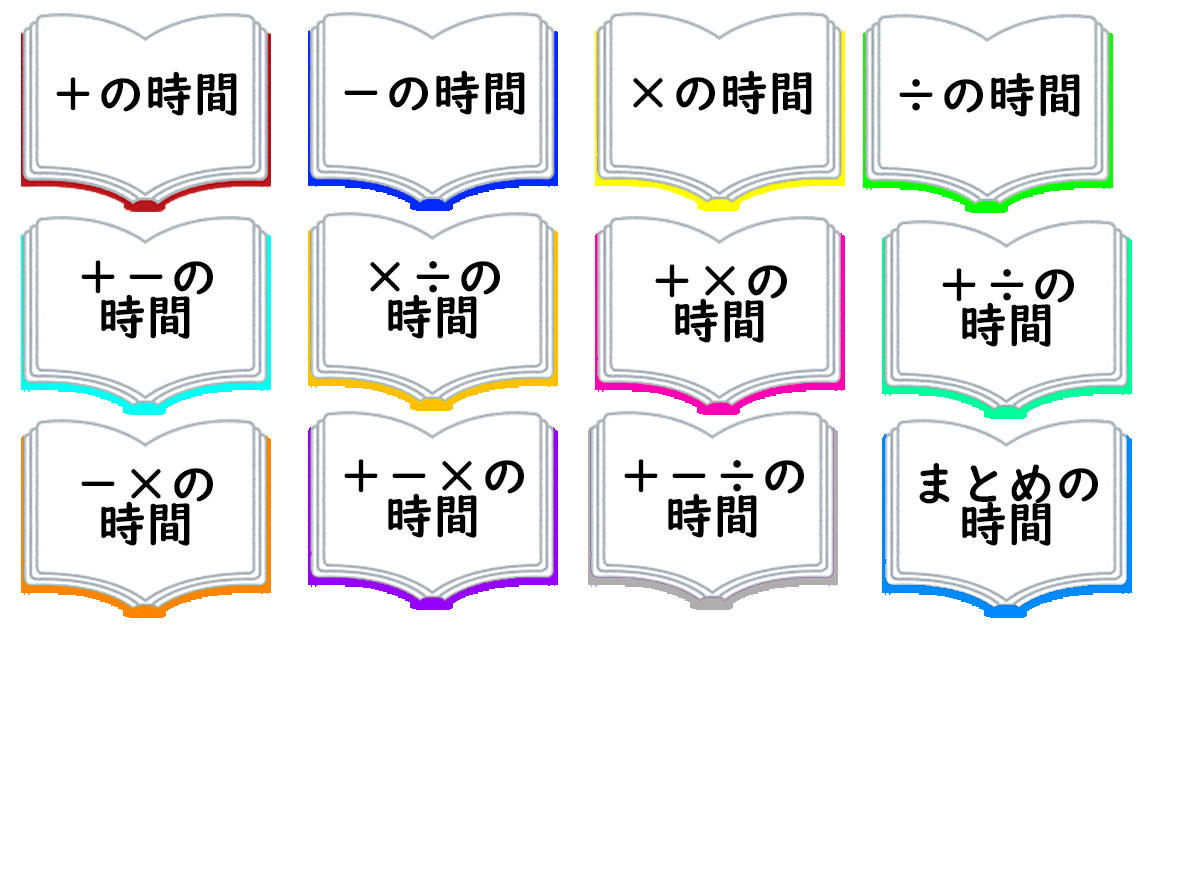
<style>
.page{position:relative;width:1200px;height:880px;background:#ffffff}
.page>*{position:absolute;margin:0}
.t1{font:48px "UDDigiKyokashoN-B";color:#000000}
.t2{font:48px/40px "UDDigiKyokashoN-B";color:#000000}
</style>
<div class="page">
<p class="t1" style="left:56px;top:71px;width:181px;height:45px">＋の時間</p>
<p class="t1" style="left:344px;top:70px;width:181px;height:45px">－の時間</p>
<p class="t1" style="left:633px;top:70px;width:179px;height:45px">×の時間</p>
<p class="t1" style="left:899px;top:72px;width:181px;height:45px">÷の時間</p>
<p class="t2" style="left:81px;top:260px;width:132px;height:79px;text-align:center">＋－の<br>時間</p>
<p class="t2" style="left:370px;top:261px;width:130px;height:78px;text-align:center">×÷の<br>時間</p>
<p class="t2" style="left:655px;top:264px;width:132px;height:79px;text-align:center">＋×の<br>時間</p>
<p class="t2" style="left:942px;top:268px;width:132px;height:79px;text-align:center">＋÷の<br>時間</p>
<p class="t2" style="left:344px;top:459px;width:180px;height:79px;text-align:center">＋－×の<br>時間</p>
<p class="t2" style="left:624px;top:459px;width:180px;height:79px;text-align:center">＋－÷の<br>時間</p>
<p class="t2" style="left:81px;top:468px;width:132px;height:78px;text-align:center">－×の<br>時間</p>
<p class="t2" style="left:919px;top:463px;width:179px;height:83px;text-align:center">まとめの<br>時間</p>
</div>
